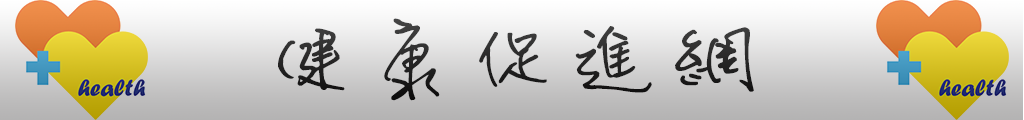
<style>
.page{position:relative;width:1024px;height:120px}
.page>*{position:absolute;margin:0}
.t1{font:91.1px "DFLiuStd-W3";color:#282828;scale:1.11 1}
</style>
<div class="page">
<p class="t1" style="left:278px;top:18px;width:476px;height:83px">健康促進網</p>
</div>
